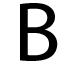
<style>
.page{position:relative;width:75px;height:75px;background:#ffffff}
.page>*{position:absolute;margin:0}
.t1{font:84.2px "MyriadPro-Regular";color:#000000;scale:1.05 1}
</style>
<div class="page">
<p class="t1" style="left:20px;top:3px;width:38px;height:58px">B</p>
</div>
